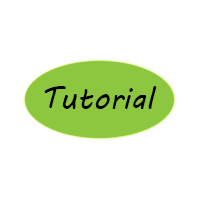
<style>
.page{position:relative;width:200px;height:200px;background:#ffffff}
.page>*{position:absolute;margin:0}
.t1{font:31px "MVBoli";color:#000000}
</style>
<div class="page">
<p class="t1" style="left:44px;top:86px;width:113px;height:23px">Tutorial</p>
</div>
